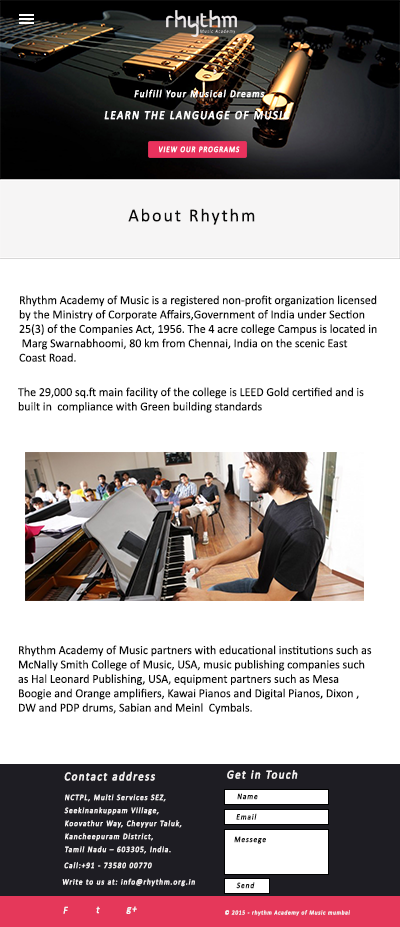
<style>
.page{position:relative;width:400px;height:927px;background:#ffffff}
.page>*{position:absolute;margin:0}
.t1{font:10.2px "Calibri";letter-spacing:0.105em;color:#fdfdfd;font-weight:bold;font-style:italic;scale:0.88 1}
.t2{font:12.2px "Calibri";letter-spacing:0.105em;color:#fdfdfd;font-weight:bold;font-style:italic;scale:0.88 1}
.t3{font:8.2px "Calibri";letter-spacing:0.105em;color:#fefcfc;font-weight:bold;font-style:italic;scale:0.87 1}
.t4{font:18.4px "Calibri";letter-spacing:0.105em;color:#0a0a0a}
.t5{font:12.2px "Calibri";color:#0a0a0a}
.t6{font:12.2px "Calibri";letter-spacing:0.105em;color:#f6f3f4;font-weight:bold;font-style:italic;scale:0.88 1}
.t7{font:8.2px/13px "Calibri";letter-spacing:0.105em;color:#f6f3f4;font-weight:bold;font-style:italic;scale:0.88 1}
.t8{font:8.2px "Calibri";letter-spacing:0.105em;color:#151515;font-weight:bold;font-style:italic;scale:0.88 1}
.t9{font:8.2px "Calibri";letter-spacing:0.105em;color:#f6f3f4;font-weight:bold;font-style:italic;scale:0.88 1}
.t10{font:10.2px "Calibri";letter-spacing:0.105em;color:#f6f3f4;font-weight:bold;font-style:italic;scale:0.88 1}
.t11{font:6.1px "Calibri";letter-spacing:0.105em;color:#f6f3f4;font-weight:bold;font-style:italic;scale:0.88 1}
</style>
<div class="page">
<p class="t1" style="left:134px;top:89px;width:131px;height:9px">Fulfill Your Musical Dreams</p>
<p class="t2" style="left:104px;top:110px;width:186px;height:10px">LEARN THE LANGUAGE OF MUSIC</p>
<p class="t3" style="left:159px;top:146px;width:81px;height:7px">VIEW OUR PROGRAMS</p>
<p class="t4" style="left:128px;top:208px;width:127px;height:17px">About Rhythm</p>
<p class="t5" style="left:19px;top:295px;width:358px;height:67px">Rhythm Academy of Music is a registered non-profit organization licensed<br>by the Ministry of Corporate Affairs,Government of India under Section <br>25(3) of the Companies Act, 1956. The 4 acre college Campus is located in<br> Marg Swarnabhoomi, 80 km from Chennai, India on the scenic East <br>Coast Road.</p>
<p class="t5" style="left:18px;top:387px;width:346px;height:26px">The 29,000 sq.ft main facility of the college is LEED Gold certified and is <br>built in  compliance with Green building standards</p>
<p class="t5" style="left:18px;top:645px;width:354px;height:69px">Rhythm Academy of Music partners with educational institutions such as<br>McNally Smith College of Music, USA, music publishing companies such <br>as Hal Leonard Publishing, USA, equipment partners such as Mesa <br>Boogie and Orange amplifiers, Kawai Pianos and Digital Pianos, Dixon , <br>DW and PDP drums, Sabian and Meinl  Cymbals.</p>
<p class="t6" style="left:64px;top:771px;width:91px;height:10px">Contact address</p>
<p class="t6" style="left:227px;top:770px;width:71px;height:9px">Get in Touch</p>
<p class="t7" style="left:64px;top:794px;width:118px;height:60px">NCTPL, Multi Services SEZ, <br>Seekinankuppam Village, <br>Koovathur Way, Cheyyur Taluk, <br>Kancheepuram District, <br>Tamil Nadu – 603305, India.</p>
<p class="t8" style="left:237px;top:793px;width:21px;height:7px">Name</p>
<p class="t8" style="left:236px;top:813px;width:21px;height:7px">Email</p>
<p class="t8" style="left:234px;top:836px;width:32px;height:8px">Messege</p>
<p class="t9" style="left:64px;top:862px;width:88px;height:7px">Call:+91 - 73580 00770</p>
<p class="t9" style="left:62px;top:878px;width:133px;height:9px">Write to us at: info@rhythm.org.in</p>
<p class="t8" style="left:236px;top:882px;width:19px;height:7px">Send</p>
<p class="t10" style="left:63px;top:906px;width:5px;height:8px">F</p>
<p class="t10" style="left:96px;top:906px;width:4px;height:8px">t</p>
<p class="t10" style="left:126px;top:906px;width:11px;height:8px">g+</p>
<p class="t11" style="left:225px;top:910px;width:125px;height:6px">© 2015 - rhythm Academy of Music mumbai</p>
</div>
